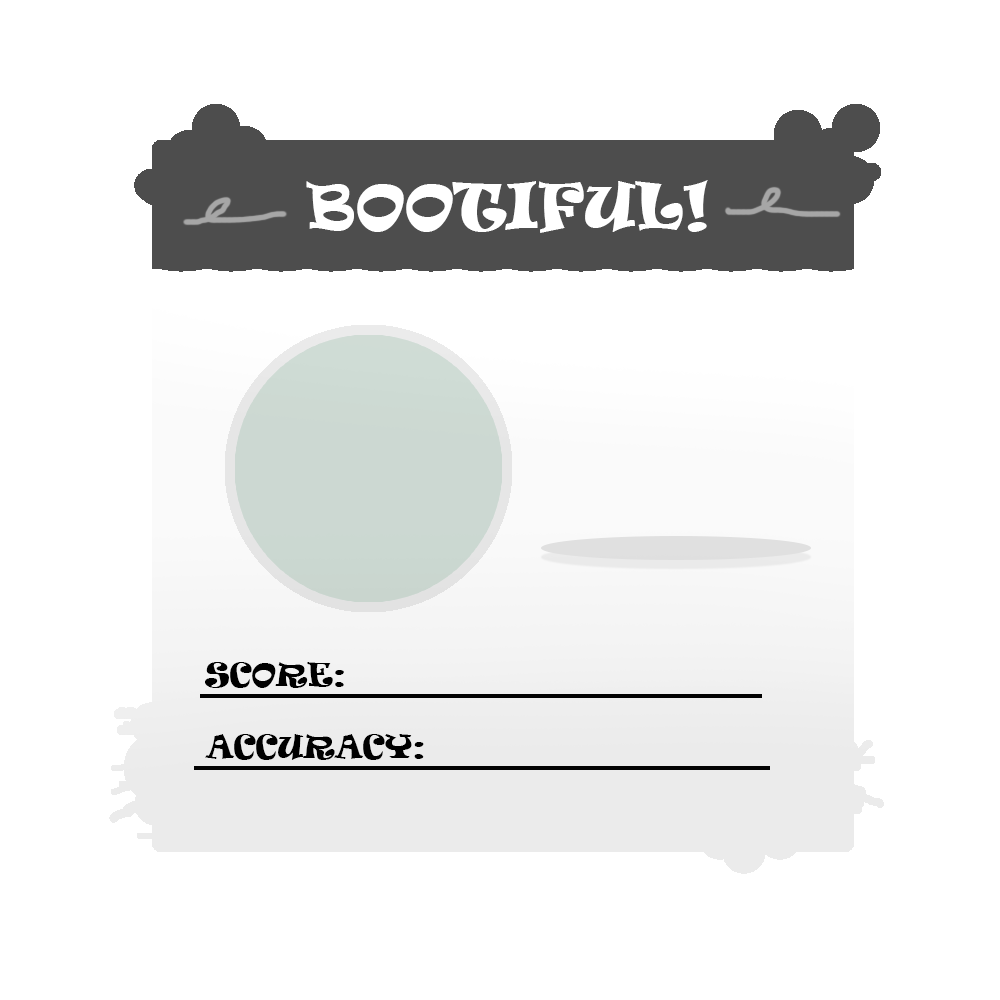
<style>
.page{position:relative;width:1000px;height:1000px;background:#ffffff}
.page>*{position:absolute;margin:0}
.t1{font:60px "Ravie";color:#ffffff}
.t2{font:30px "Ravie";color:#000000}
</style>
<div class="page">
<p class="t1" style="left:306px;top:180px;width:402px;height:53px">BOOTIFUL!</p>
<p class="t2" style="left:205px;top:662px;width:139px;height:26px">SCORE:</p>
<p class="t2" style="left:205px;top:734px;width:219px;height:26px">ACCURACY:</p>
</div>
